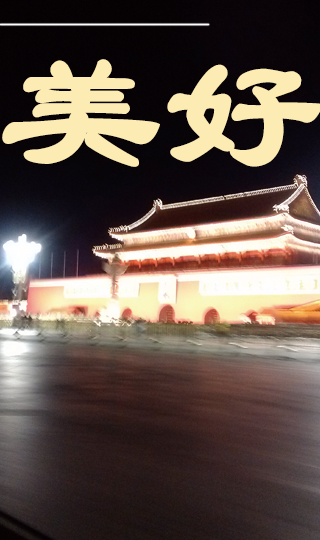
<style>
.page{position:relative;width:320px;height:540px}
.page>*{position:absolute;margin:0}
.t1{font:160px "LiSu";color:#fcebb3;font-weight:bold}
</style>
<div class="page">
<p class="t1" style="left:2px;top:59px;width:320px;height:108px">美好</p>
</div>
